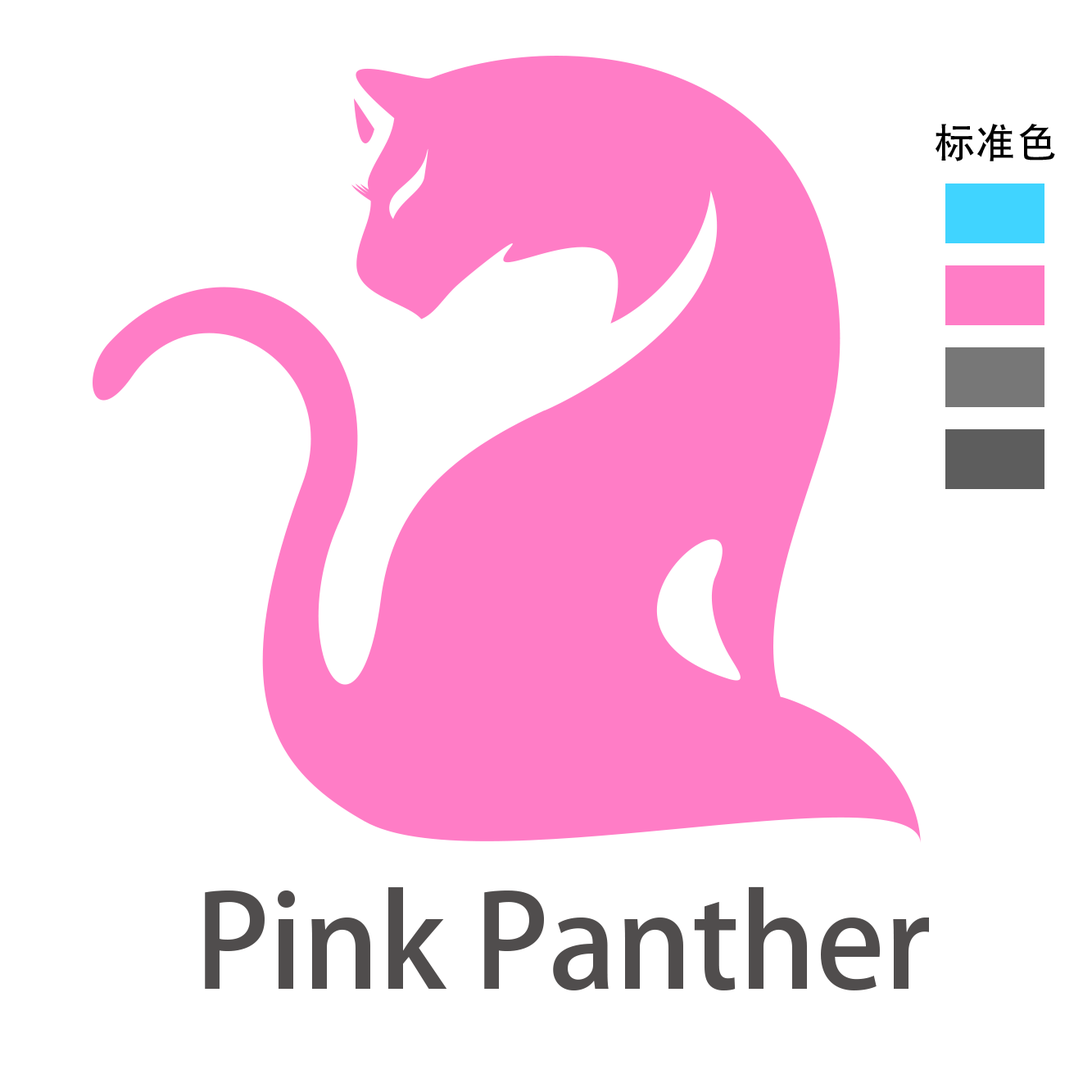
<style>
.page{position:relative;width:1092px;height:1092px;background:#ffffff}
.page>*{position:absolute;margin:0}
.t1{font:41px "AdobeHeitiStd-Regular";color:#000000}
.t2{font:127px "AdobeHeitiStd-Regular";color:#504d4d}
</style>
<div class="page">
<p class="t1" style="left:936px;top:124px;width:119px;height:37px">标准色</p>
<p class="t2" style="left:205px;top:886px;width:724px;height:104px">Pink Panther</p>
</div>
